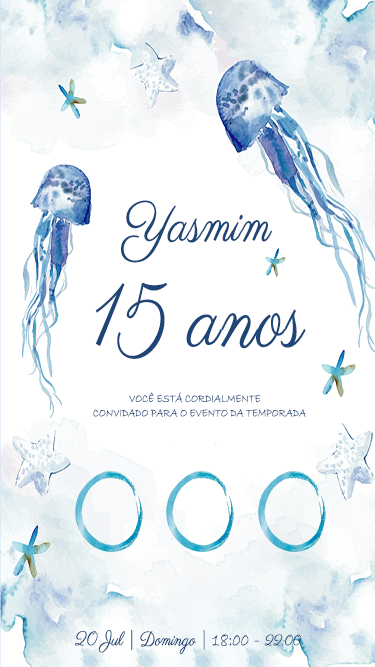
<style>
.page{position:relative;width:375px;height:667px;background:#ffffff}
.page>*{position:absolute;margin:0}
.t1{font:57.1px "Parisienne-Regular";letter-spacing:0.01em;color:#1d4576;scale:0.79 1}
.t2{font:89.8px "Parisienne-Regular";letter-spacing:0.01em;color:#1d4576;scale:0.79 1}
.t3{font:12.2px/14.4px "BradleyHandITC";letter-spacing:0.01em;color:#1d4576;scale:0.79 1}
.t4{font:19.6px "Parisienne-Regular";letter-spacing:0.01em;color:#1d4576;scale:0.79 1}
.t5{font:19.6px "BradleyHandITC";letter-spacing:0.01em;color:#1d4576;scale:0.79 1}
.t6{font:14.7px "Parisienne-Regular";letter-spacing:0.01em;color:#1d4576;scale:0.79 1}
</style>
<div class="page">
<p class="t1" style="left:121px;top:200px;width:151px;height:63px">Yasmim</p>
<p class="t2" style="left:95px;top:282px;width:211px;height:77px">15 anos</p>
<p class="t3" style="left:93px;top:392px;width:213px;height:25px">VOCÊ ESTÁ CORDIALMENTE <br>CONVIDADO PARA O EVENTO DA TEMPORADA</p>
<p class="t4" style="left:75px;top:630px;width:227px;height:24px">20 Jul <span class="t5">| </span>Domingo <span class="t5">| 18:00</span> - <span class="t6">22:00</span></p>
</div>
